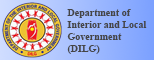
<style>
.page{position:relative;width:154px;height:60px}
.page>*{position:absolute;margin:0}
.t1{font:10px "TimesNewRomanPS-BoldMT";color:#454545}
</style>
<div class="page">
<p class="t1" style="left:67px;top:9px;width:80px;height:45px;text-align:right">Department of <br>Interior and Local <br>Government <br>(DILG)</p>
</div>
